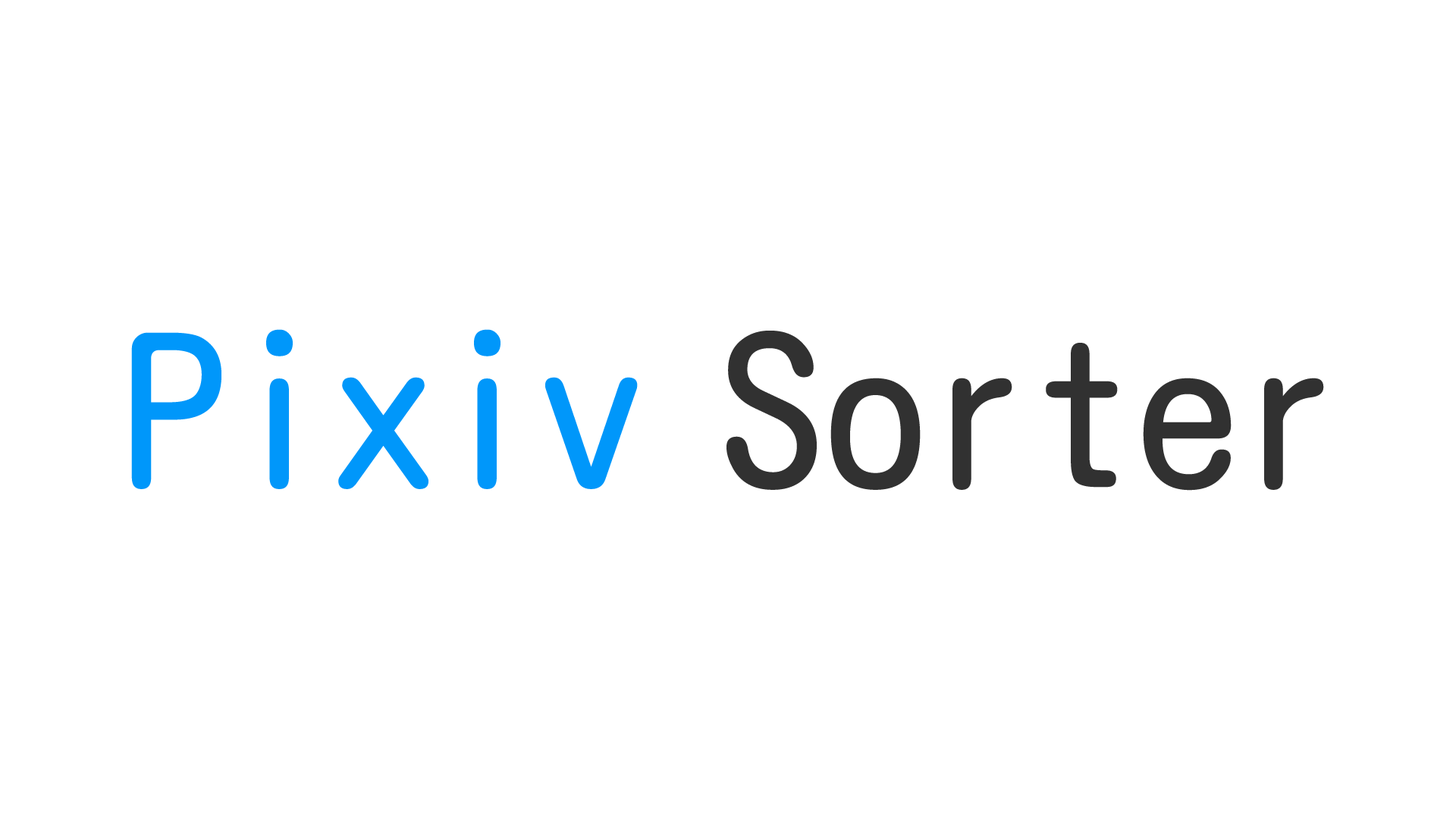
<style>
.page{position:relative;width:1456px;height:819px;background:#ffffff}
.page>*{position:absolute;margin:0}
.t1{font:207.8px "MotoyaLMaru-W3-90ms-RKSJ-H";color:#0097fa}
.t2{font:207.8px "MotoyaLMaru-W3-90ms-RKSJ-H";color:#313131}
</style>
<div class="page">
<p class="t1" style="left:131px;top:329px;width:507px;height:160px">Pixiv</p>
<p class="t2" style="left:726px;top:331px;width:598px;height:160px">Sorter</p>
</div>
